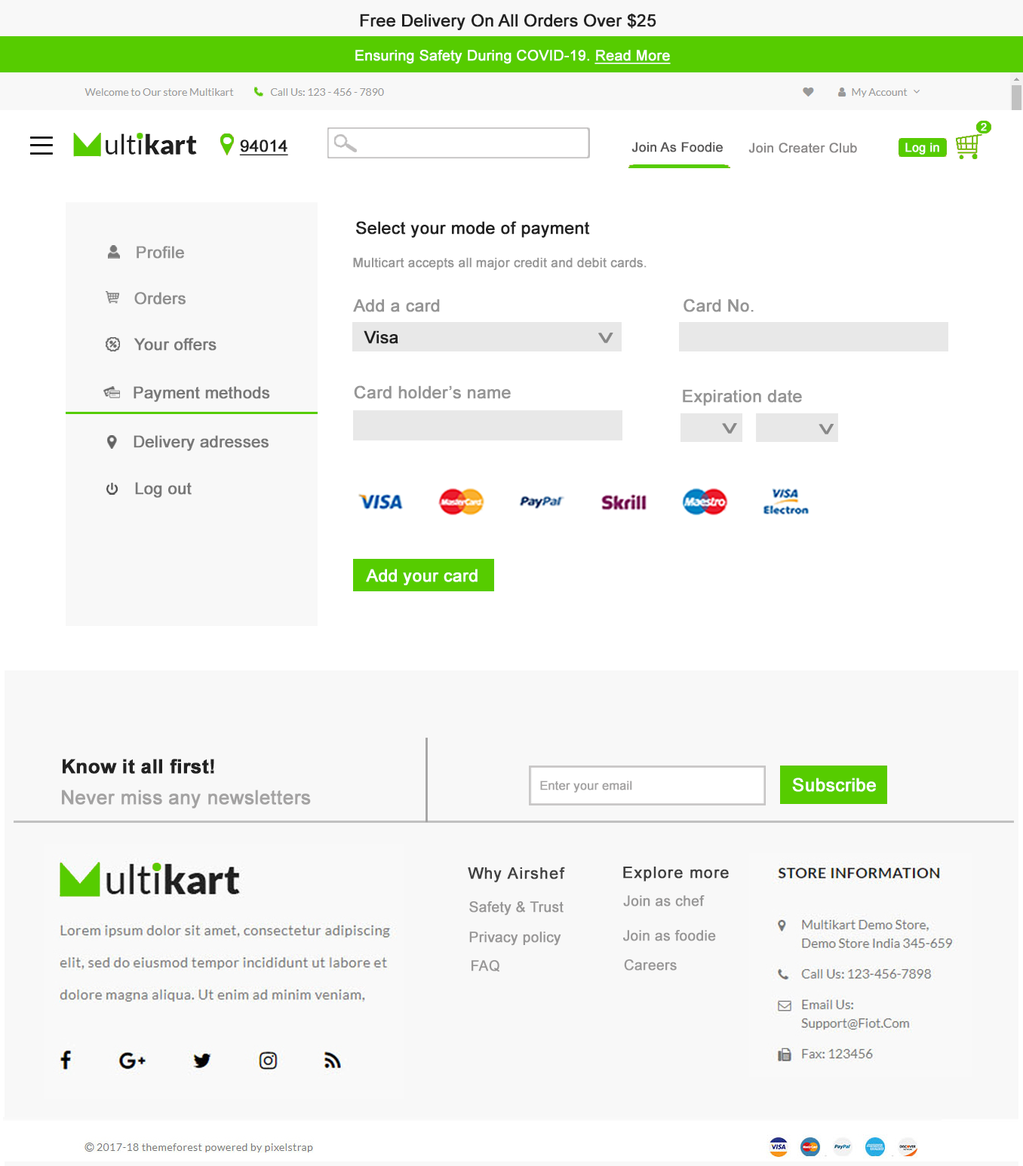
<style>
.page{position:relative;width:1023px;height:1166px;background:#ffffff}
.page>*{position:absolute;margin:0}
.t1{font:16.9px "ArialMT";color:#222222;font-weight:bold}
.t2{font:14.5px "ArialMT";color:#ffffff;font-weight:bold}
.t3{font:14.5px "ArialMT";color:#ffffff;font-weight:bold;text-decoration:underline}
.t4{font:10.7px "ArialMT";color:#ffffff;font-weight:bold}
.t5{font:16.5px "ArialMT";color:#222222;font-weight:bold;text-decoration:underline}
.t6{font:13.2px "ArialMT";color:#585757;font-weight:bold}
.t7{font:13.2px "ArialMT";color:#8a8888;font-weight:bold}
.t8{font:12.1px "ArialMT";color:#ffffff;font-weight:bold}
.t9{font:17px "ArialMT";color:#222222;font-weight:bold}
.t10{font:16.2px "ArialMT";color:#919191;font-weight:bold}
.t11{font:12.8px "ArialMT";color:#959595;font-weight:bold}
.t12{font:16.2px "ArialMT";color:#8e8e8e;font-weight:bold}
.t13{font:17px "ArialMT";color:#959595;font-weight:bold}
.t14{font:16.2px "ArialMT";color:#787878;font-weight:bold}
.t15{font:29.4px "ArialMT";color:#888888;font-weight:bold;scale:0.7 1}
.t16{font:17px "ArialMT";color:#ffffff;font-weight:bold}
.t17{font:19.4px "Arial-BoldMT";color:#222222;font-weight:bold}
.t18{font:12px "ArialMT";color:#a3a2a2;font-weight:bold}
.t19{font:18.1px "ArialMT";color:#ffffff;font-weight:bold}
.t20{font:19.4px "ArialMT";color:#a3a2a2;font-weight:bold}
.t21{font:15.7px "ArialMT";letter-spacing:0.05em;color:#414141;font-weight:bold}
.t22{font:15.7px "ArialMT";letter-spacing:0.05em;color:#3e3e3e;font-weight:bold}
.t23{font:14.2px "ArialMT";color:#979696;font-weight:bold}
.t24{font:14.2px "ArialMT";color:#989797;font-weight:bold}
</style>
<div class="page">
<p class="t1" style="left:360px;top:14px;width:296px;height:16px">Free Delivery On All Orders Over $25</p>
<p class="t2" style="left:355px;top:50px;width:315px;height:14px">Ensuring Safety During COVID-19. <span class="t3">Read More</span></p>
<p class="t4" style="left:980px;top:123px;width:6px;height:8px">2</p>
<p class="t5" style="left:239px;top:140px;width:49px;height:15px">94014</p>
<p class="t6" style="left:631px;top:142px;width:92px;height:10px">Join As Foodie</p>
<p class="t7" style="left:748px;top:143px;width:109px;height:10px">Join Creater Club</p>
<p class="t8" style="left:905px;top:143px;width:34px;height:12px">Log in</p>
<p class="t9" style="left:356px;top:221px;width:234px;height:17px">Select your mode of payment</p>
<p class="t10" style="left:137px;top:246px;width:47px;height:13px">Profile</p>
<p class="t11" style="left:353px;top:257px;width:293px;height:13px">Multicart accepts all major credit and debit cards.</p>
<p class="t12" style="left:134px;top:292px;width:52px;height:13px">Orders</p>
<p class="t13" style="left:353px;top:299px;width:87px;height:13px">Add a card</p>
<p class="t13" style="left:683px;top:299px;width:70px;height:13px">Card No.</p>
<p class="t14" style="left:133px;top:338px;width:83px;height:13px">Your offers</p>
<p class="t9" style="left:364px;top:330px;width:34px;height:14px">Visa</p>
<p class="t15" style="left:598px;top:333px;width:15px;height:10px;rotate:89deg">&gt;</p>
<p class="t14" style="left:133px;top:386px;width:137px;height:16px">Payment methods</p>
<p class="t13" style="left:354px;top:385px;width:157px;height:14px">Card holder’s name</p>
<p class="t13" style="left:683px;top:389px;width:119px;height:17px">Expiration date</p>
<p class="t15" style="left:722px;top:423px;width:15px;height:11px;rotate:89deg">&gt;</p>
<p class="t15" style="left:818px;top:424px;width:15px;height:10px;rotate:89deg">&gt;</p>
<p class="t14" style="left:133px;top:435px;width:135px;height:16px">Delivery adresses</p>
<p class="t14" style="left:135px;top:482px;width:57px;height:16px">Log out</p>
<p class="t16" style="left:366px;top:569px;width:111px;height:16px">Add your card</p>
<p class="t17" style="left:63px;top:759px;width:151px;height:15px">Know it all first!</p>
<p class="t18" style="left:540px;top:781px;width:92px;height:12px">Enter your email</p>
<p class="t19" style="left:792px;top:778px;width:84px;height:14px">Subscribe</p>
<p class="t20" style="left:62px;top:790px;width:249px;height:18px">Never miss any newsletters</p>
<p class="t21" style="left:468px;top:867px;width:97px;height:15px">Why Airshef</p>
<p class="t22" style="left:623px;top:867px;width:106px;height:15px">Explore more</p>
<p class="t23" style="left:469px;top:901px;width:94px;height:15px">Safety &amp; Trust</p>
<p class="t24" style="left:623px;top:895px;width:81px;height:12px">Join as chef</p>
<p class="t24" style="left:623px;top:930px;width:93px;height:11px">Join as foodie</p>
<p class="t23" style="left:469px;top:931px;width:92px;height:15px">Privacy policy</p>
<p class="t23" style="left:471px;top:960px;width:28px;height:12px">FAQ</p>
<p class="t24" style="left:624px;top:959px;width:53px;height:12px">Careers</p>
</div>
